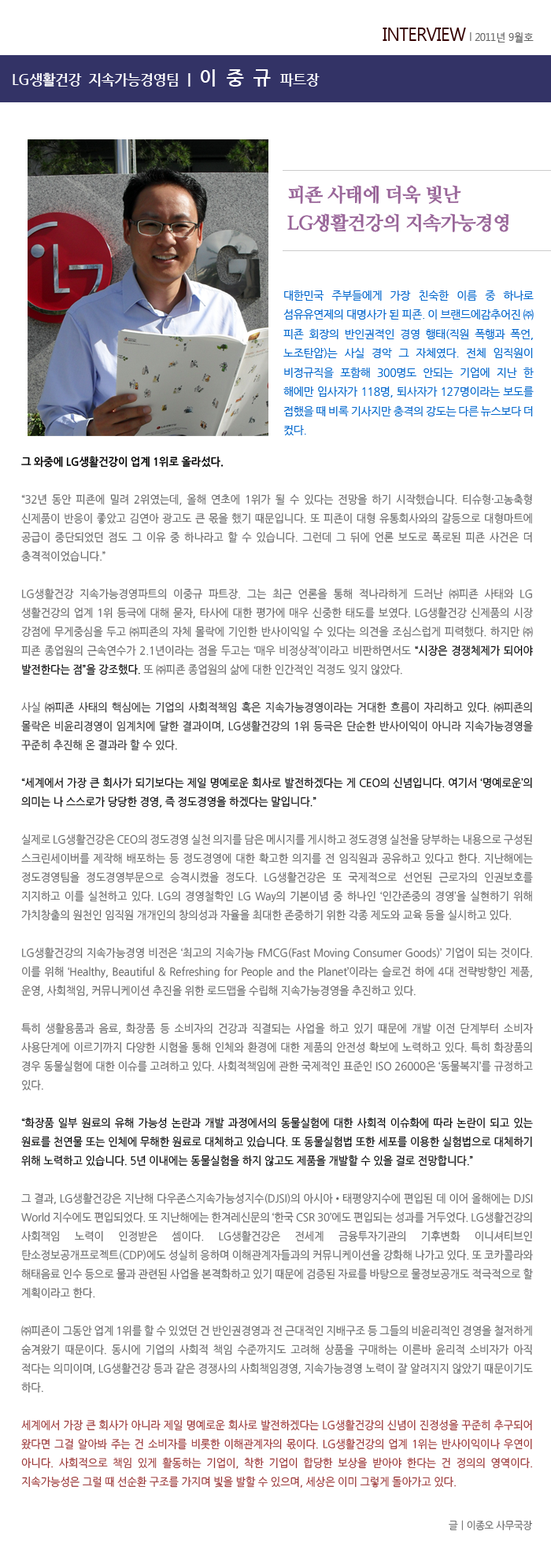
<style>
.page{position:relative;width:551px;height:1568px;background:#ffffff}
.page>*{position:absolute;margin:0}
.t1{font:11px "MalgunGothicRegular";letter-spacing:-0.025em;color:#666666;scale:0.9 1}
.t2{font:18.9px "MalgunGothicRegular";letter-spacing:-0.025em;color:#330000;scale:0.9 1}
.t3{font:14.2px "NanumGothicBold";letter-spacing:-0.025em;color:#ffffff}
.t4{font:18.9px "NanumGothicBold";letter-spacing:-0.025em;color:#ffffff}
.t5{font:18.9px/28.3px "NanumMyeongjoExtraBold";letter-spacing:-0.025em;color:#996699}
.t6{font:11px "NanumGothic";letter-spacing:-0.03em;color:#0066cc}
.t7{font:11px/18.9px "NanumGothic";letter-spacing:-0.01em;color:#666666;scale:0.95 1}
.t8{font:11px/18.9px "NanumGothicBold";letter-spacing:-0.01em;color:#000000;scale:0.95 1}
.t9{font:11px/18.9px "Gulim";letter-spacing:-0.01em;color:#666666;scale:0.95 1}
.t10{font:11px/18.9px "NanumGothic";letter-spacing:-0.01em;color:#000000;scale:0.95 1}
.t11{font:11px/18.9px "NanumGothic";letter-spacing:-0.01em;color:#333333;scale:0.95 1}
.t12{font:11px/18.9px "NanumGothic";letter-spacing:-0.01em;color:#993333;scale:0.95 1}
.t13{font:10.3px "NanumGothic";letter-spacing:-0.025em;color:#666666;scale:0.95 1}
</style>
<div class="page">
<p class="t1" style="left:383px;top:28px;width:151px;height:15px"><span class="t2">INTERVIEW </span>l 2011년 9월호</p>
<p class="t3" style="left:13px;top:69px;width:307px;height:18px">LG생활건강  지속가능경영팀 ㅣ <span class="t4">이  중  규  </span>파트장</p>
<p class="t5" style="left:287px;top:185px;width:221px;height:47px">피죤 사태에 더욱 빛난 <br>LG생활건강의 지속가능경영</p>
<p class="t6" style="left:283px;top:290px;width:251px;height:145px;text-align:justify">대한민국 주부들에게 가장 친숙한 이름 중 하나로 섬유유연제의 대명사가 된 피죤. 이 브랜드에감추어진 ㈜피죤 회장의 반인권적인 경영 행태(직원 폭행과 폭언, 노조탄압)는 사실 경악 그 자체였다. 전체 임직원이 비정규직을 포함해 300명도 안되는 기업에 지난 한 해에만 입사자가 118명, 퇴사자가 127명이라는 보도를 접했을 때 비록 기사지만 충격의 강도는 다른 뉴스보다 더 컸다.</p>
<p class="t7" style="left:21px;top:456px;width:512px;height:1032px;text-align:justify"><span class="t8">그 와중에 LG생활건강이 업계 1위로 올라섰다. <br></span><br>“32년 동안 피죤에 밀려 2위였는데, 올해 연초에 1위가 될 수 있다는 전망을 하기 시작했습니다. 티슈형<span class="t9">∙</span>고농축형 신제품이 반응이 좋았고 김연아 광고도 큰 몫을 했기 때문입니다. 또 피죤이 대형 유통회사와의 갈등으로 대형마트에 공급이 중단되었던 점도 그 이유 중 하나라고 할 수 있습니다. 그런데 그 뒤에 언론 보도로 폭로된 피죤 사건은 더 충격적이었습니다.”<br><br>LG생활건강 지속가능경영파트의 이중규 파트장. 그는 최근 언론을 통해 적나라하게 드러난 ㈜피죤 사태와 LG생활건강의 업계 1위 등극에 대해 묻자, 타사에 대한 평가에 매우 신중한 태도를 보였다. LG생활건강 신제품의 시장 강점에 무게중심을 두고 ㈜피죤의 자체 몰락에 기인한 반사이익일 수 있다는 의견을 조심스럽게 피력했다. 하지만 ㈜피죤 종업원의 근속연수가 2.1년이라는 점을 두고는 ‘매우 비정상적’이라고 비판하면서도 <span class="t10">“시장은 경쟁체제가 되어야 발전한다는 점”을 강조했다. </span>또 ㈜피죤 종업원의 삶에 대한 인간적인 걱정도 잊지 않았다. <br><br>사실 <span class="t11">㈜피죤 사태의 핵심에는 기업의 사회적책임 혹은 지속가능경영이라는 거대한 흐름이 자리하고 있다. ㈜피죤의 몰락은 비윤리경영이 임계치에 달한 결과이며, LG생활건강의 1위 등극은 단순한 반사이익이 아니라 지속가능경영을 꾸준히 추진해 온 결과라 할 수 있다. <br></span><span class="t10"><br>“세계에서 가장 큰 회사가 되기보다는 제일 명예로운 회사로 발전하겠다는 게 CEO의 신념입니다. 여기서 ‘명예로운’의 의미는 나 스스로가 당당한 경영, 즉 정도경영을 하겠다는 말입니다.”<br></span><br>실제로 LG생활건강은 CEO의 정도경영 실천 의지를 담은 메시지를 게시하고 정도경영 실천을 당부하는 내용으로 구성된 스크린세이버를 제작해 배포하는 등 정도경영에 대한 확고한 의지를 전 임직원과 공유하고 있다고 한다. 지난해에는 정도경영팀을 정도경영부문으로 승격시켰을 정도다. LG생활건강은 또 국제적으로 선언된 근로자의 인권보호를 지지하고 이를 실천하고 있다. LG의 경영철학인 LG Way의 기본이념 중 하나인 ‘인간존중의 경영’을 실현하기 위해 가치창출의 원천인 임직원 개개인의 창의성과 자율을 최대한 존중하기 위한 각종 제도와 교육 등을 실시하고 있다. <br><br>LG생활건강의 지속가능경영 비전은 ‘최고의 지속가능 FMCG(Fast Moving Consumer Goods)’ 기업이 되는 것이다. 이를 위해 ‘Healthy, Beautiful &amp; Refreshing for People and the Planet’이라는 슬로건 하에 4대 전략방향인 제품, 운영, 사회책임, 커뮤니케이션 추진을 위한 로드맵을 수립해 지속가능경영을 추진하고 있다. <br><br>특히 생활용품과 음료, 화장품 등 소비자의 건강과 직결되는 사업을 하고 있기 때문에 개발 이전 단계부터 소비자 사용단계에 이르기까지 다양한 시험을 통해 인체와 환경에 대한 제품의 안전성 확보에 노력하고 있다. 특히 화장품의 경우 동물실험에 대한 이슈를 고려하고 있다. 사회적책임에 관한 국제적인 표준인 ISO 26000은 ‘동물복지’를 규정하고 있다.<br><br><span class="t10">“화장품 일부 원료의 유해 가능성 논란과 개발 과정에서의 동물실험에 대한 사회적 이슈화에 따라 논란이 되고 있는 원료를 천연물 또는 인체에 무해한 원료로 대체하고 있습니다. 또 동물실험법 또한 세포를 이용한 실험법으로 대체하기 위해 노력하고 있습니다. 5년 이내에는 동물실험을 하지 않고도 제품을 개발할 수 있을 걸로 전망합니다.” </span> <br> <br>그 결과, LG생활건강은 지난해 다우존스지속가능성지수(DJSI)의 아시아•태평양지수에 편입된 데 이어 올해에는 DJSI World 지수에도 편입되었다. 또 지난해에는 한겨레신문의 ‘한국 CSR 30’에도 편입되는 성과를 거두었다. LG생활건강의 사회잭임 노력이 인정받은 셈이다. LG생활건강은 전세계 금융투자기관의 기후변화 이니셔티브인 탄소정보공개프로젝트(CDP)에도 성실히 응하며 이해관계자들과의 커뮤니케이션을 강화해 나가고 있다. 또 코카콜라와 해태음료 인수 등으로 물과 관련된 사업을 본격화하고 있기 때문에 검증된 자료를 바탕으로 물정보공개도 적극적으로 할 계획이라고 한다. <br><br>㈜피죤이 그동안 업계 1위를 할 수 있었던 건 반인권경영과 전 근대적인 지배구조 등 그들의 비윤리적인 경영을 철저하게 숨겨왔기 때문이다. 동시에 기업의 사회적 책임 수준까지도 고려해 상품을 구매하는 이른바 윤리적 소비자가 아직 적다는 의미이며, LG생활건강 등과 같은 경쟁사의 사회책임경영, 지속가능경영 노력이 잘 알려지지 않았기 때문이기도 하다. <br><br><span class="t12">세계에서 가장 큰 회사가 아니라 제일 명예로운 회사로 발전하겠다는 LG생활건강의 신념이 진정성을 꾸준히 추구되어 왔다면 그걸 알아봐 주는 건 소비자를 비롯한 이해관계자의 몫이다. LG생활건강의 업계 1위는 반사이익이나 우연이 아니다. 사회적으로 책임 있게 활동하는 기업이, 착한 기업이 합당한 보상을 받아야 한다는 건 정의의 영역이다. 지속가능성은 그럴 때 선순환 구조를 가지며 빛을 발할 수 있으며, 세상은 이미 그렇게 돌아가고 있다.</span></p>
<p class="t13" style="left:449px;top:1520px;width:83px;height:11px">글ㅣ이종오 사무국장</p>
</div>
